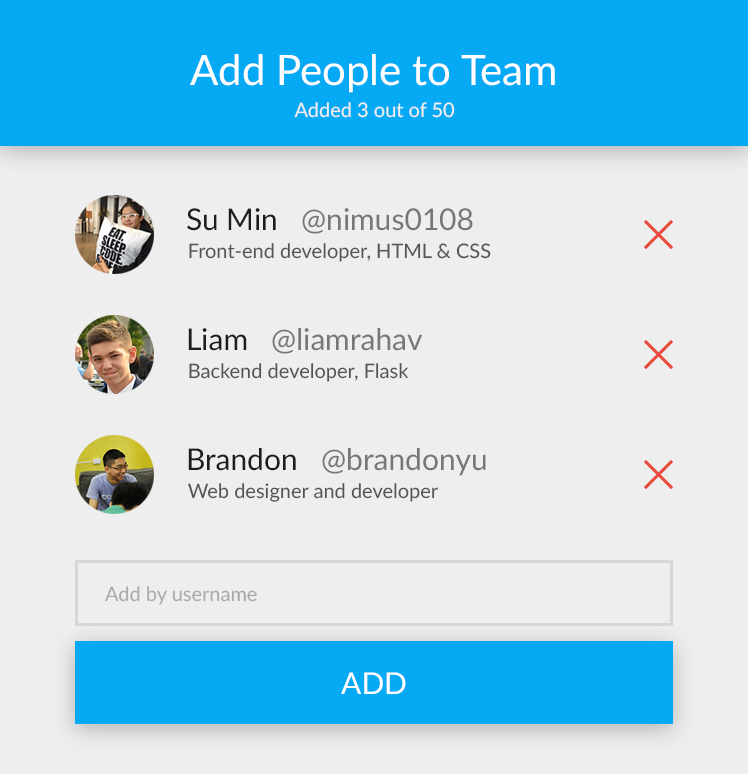
<style>
.page{position:relative;width:748px;height:774px;background:#eeeeee}
.page>*{position:absolute;margin:0}
.t1{font:42px "Lato-Regular";color:#ffffff}
.t2{font:20px "Lato-Regular";color:#eeeeee}
.t3{font:30px "Lato-Regular";color:#1d1d1d}
.t4{font:30px "Lato-Regular";color:#777777}
.t5{font:20px "Lato-Regular";color:#555555}
.t6{font:20px "Lato-Regular";color:#aaaaaa}
.t7{font:30px "Lato-Regular";color:#ffffff}
</style>
<div class="page">
<p class="t1" style="left:190px;top:54px;width:365px;height:39px">Add People to Team</p>
<p class="t2" style="left:294px;top:102px;width:161px;height:16px">Added 3 out of 50</p>
<p class="t3" style="left:187px;top:208px;width:89px;height:23px">Su Min</p>
<p class="t4" style="left:302px;top:208px;width:171px;height:26px">@nimus0108</p>
<p class="t5" style="left:189px;top:243px;width:302px;height:19px">Front-end developer, HTML &amp; CSS</p>
<p class="t3" style="left:188px;top:328px;width:59px;height:23px">Liam</p>
<p class="t4" style="left:272px;top:328px;width:150px;height:26px">@liamrahav</p>
<p class="t5" style="left:189px;top:363px;width:220px;height:19px">Backend developer, Flask</p>
<p class="t3" style="left:188px;top:448px;width:108px;height:23px">Brandon</p>
<p class="t4" style="left:322px;top:448px;width:164px;height:28px">@brandonyu</p>
<p class="t5" style="left:188px;top:483px;width:250px;height:19px">Web designer and developer</p>
<p class="t6" style="left:105px;top:586px;width:152px;height:19px">Add by username</p>
<p class="t7" style="left:341px;top:672px;width:65px;height:22px">ADD</p>
</div>
